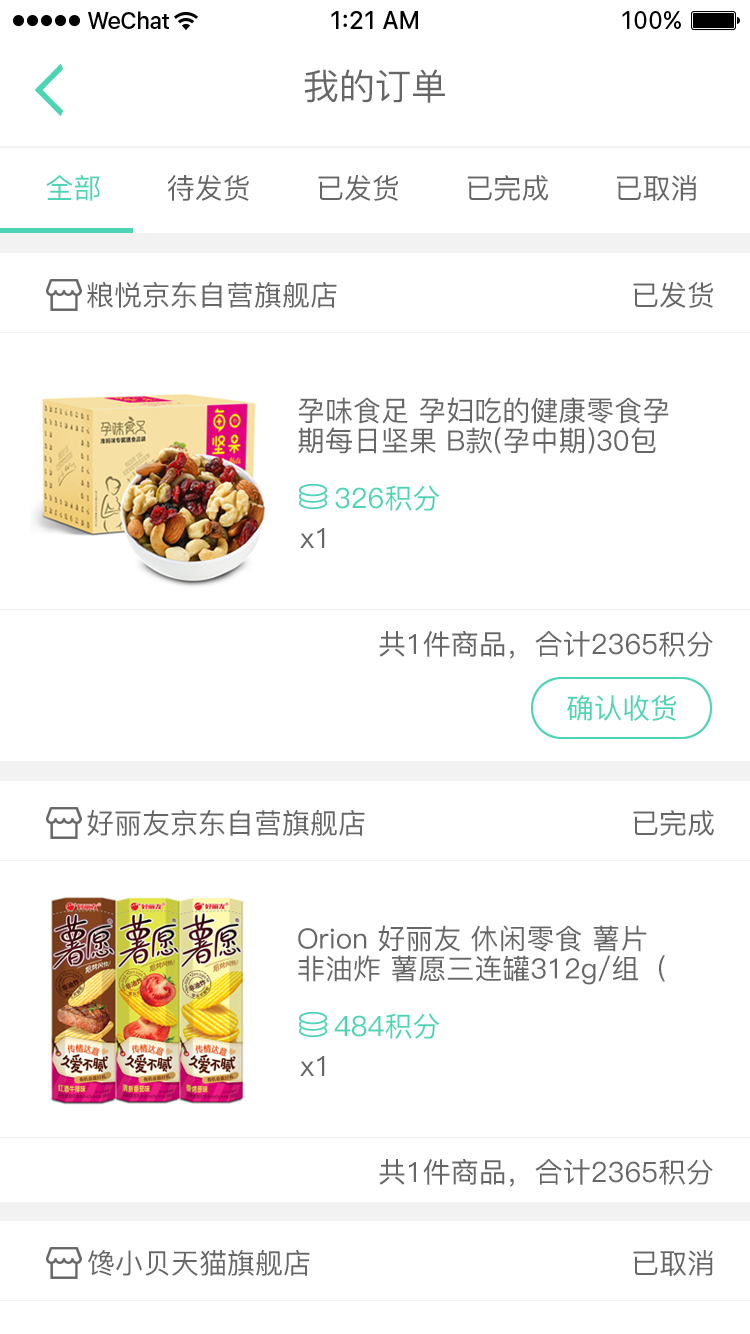
<style>
.page{position:relative;width:750px;height:1334px;background:#ffffff}
.page>*{position:absolute;margin:0}
.t1{font:36px "PingFang-SC-Medium";color:#666666}
.t2{font:28px "PingFang-SC-Medium";color:#666666}
.t3{font:28px "PingFang-SC-Medium";color:#4cd4b4}
.t4{font:28px/30px "PingFang-SC-Medium";color:#666666}
</style>
<div class="page">
<p class="t1" style="left:304px;top:69px;width:141px;height:34px">我的订单</p>
<p class="t2" style="left:46px;top:175px;width:651px;height:26px"><span class="t3">全部       </span>待发货       已发货       已完成       已取消</p>
<p class="t2" style="left:87px;top:282px;width:250px;height:26px">粮悦京东自营旗舰店</p>
<p class="t2" style="left:633px;top:282px;width:80px;height:26px">已发货</p>
<p class="t4" style="left:298px;top:397px;width:371px;height:57px">孕味食足 孕妇吃的健康零食孕期每日坚果 B款(孕中期)30包</p>
<p class="t3" style="left:335px;top:485px;width:104px;height:26px">326积分</p>
<p class="t2" style="left:300px;top:528px;width:25px;height:20px">x1</p>
<p class="t2" style="left:379px;top:630px;width:334px;height:29px">共1件商品，合计2365积分</p>
<p class="t3" style="left:567px;top:695px;width:109px;height:26px">确认收货</p>
<p class="t2" style="left:87px;top:809px;width:278px;height:27px">好丽友京东自营旗舰店</p>
<p class="t2" style="left:633px;top:810px;width:81px;height:26px">已完成</p>
<p class="t4" style="left:298px;top:925px;width:367px;height:60px">Orion 好丽友 休闲零食 薯片 非油炸 薯愿三连罐312g/组（104g*3薯片）</p>
<p class="t3" style="left:334px;top:1013px;width:105px;height:26px">484积分</p>
<p class="t2" style="left:300px;top:1056px;width:25px;height:20px">x1</p>
<p class="t2" style="left:379px;top:1158px;width:334px;height:29px">共1件商品，合计2365积分</p>
<p class="t2" style="left:88px;top:1250px;width:222px;height:26px">馋小贝天猫旗舰店</p>
<p class="t2" style="left:633px;top:1250px;width:80px;height:26px">已取消</p>
</div>
